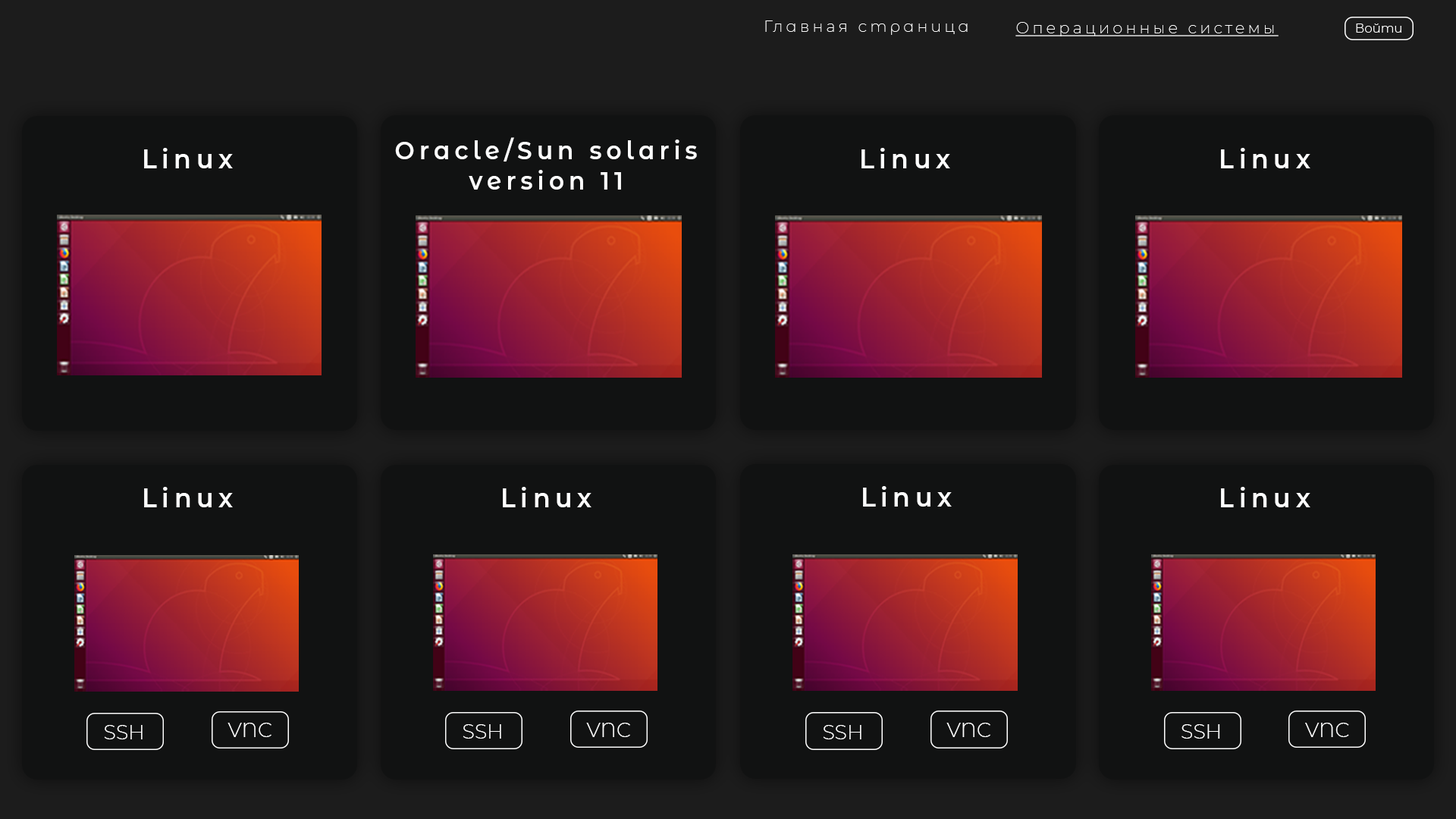
<style>
.page{position:relative;width:1456px;height:819px;background:#111212}
.page>*{position:absolute;margin:0}
.t1{font:15.8px "Montserrat-ExtraLight";letter-spacing:0.2em;color:#ffffff}
.t2{font:15.8px "Montserrat-ExtraLight";letter-spacing:0.2em;color:#ffffff;text-decoration:underline}
.t3{font:12.6px "Montserrat-Light";color:#ffffff}
.t4{font:25.3px "Montserrat-SemiBold";letter-spacing:0.2em;color:#ffffff;scale:0.93 1}
.t5{font:27px "Montserrat-SemiBold";letter-spacing:0.2em;color:#ffffff;scale:0.93 1}
.t6{font:27.1px "Montserrat-SemiBold";letter-spacing:0.2em;color:#ffffff;scale:0.93 1}
.t7{font:20.3px "Montserrat-Light";color:#ffffff}
</style>
<div class="page">
<p class="t1" style="left:765px;top:20px;width:203px;height:15px">Главная страница</p>
<p class="t2" style="left:1015px;top:22px;width:264px;height:14px">Операционные системы</p>
<p class="t3" style="left:1356px;top:24px;width:45px;height:9px">Войти</p>
<p class="t4" style="left:395px;top:137px;width:302px;height:53px;text-align:center">Oracle/Sun solaris<br>version 11</p>
<p class="t5" style="left:144px;top:148px;width:89px;height:20px">Linux</p>
<p class="t6" style="left:861px;top:148px;width:89px;height:20px">Linux</p>
<p class="t5" style="left:1221px;top:148px;width:89px;height:20px">Linux</p>
<p class="t5" style="left:144px;top:487px;width:89px;height:20px">Linux</p>
<p class="t5" style="left:503px;top:487px;width:88px;height:20px">Linux</p>
<p class="t6" style="left:863px;top:486px;width:89px;height:21px">Linux</p>
<p class="t5" style="left:1221px;top:487px;width:89px;height:20px">Linux</p>
<p class="t7" style="left:104px;top:725px;width:39px;height:14px">SSH</p>
<p class="t7" style="left:227px;top:723px;width:44px;height:14px">VNC</p>
<p class="t7" style="left:463px;top:724px;width:38px;height:15px">SSH</p>
<p class="t7" style="left:586px;top:723px;width:44px;height:14px">VNC</p>
<p class="t7" style="left:823px;top:725px;width:38px;height:14px">SSH</p>
<p class="t7" style="left:946px;top:723px;width:44px;height:14px">VNC</p>
<p class="t7" style="left:1181px;top:724px;width:39px;height:15px">SSH</p>
<p class="t7" style="left:1305px;top:723px;width:44px;height:14px">VNC</p>
</div>
